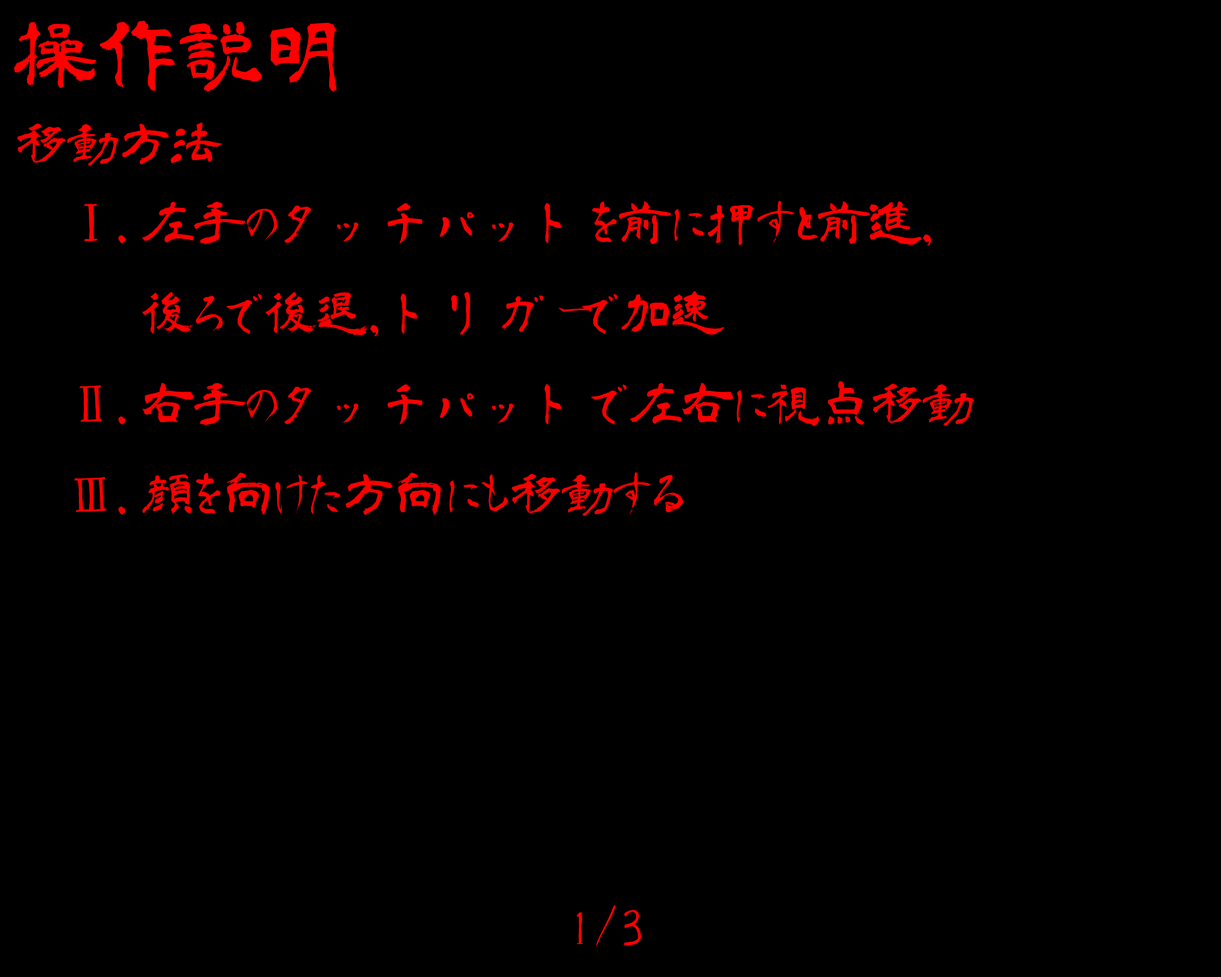
<style>
.page{position:relative;width:1221px;height:977px;background:#000000}
.page>*{position:absolute;margin:0}
.t1{font:82.7px "aoyagireisyosimo2";color:#ff0000}
.t2{font:51.7px "aoyagireisyosimo2";color:#fa0000}
.t3{font:51.7px "aoyagireisyosimo2";color:#ff0000}
</style>
<div class="page">
<p class="t1" style="left:14px;top:21px;width:323px;height:71px">操作説明</p>
<p class="t2" style="left:17px;top:122px;width:205px;height:44px">移動方法</p>
<p class="t2" style="left:74px;top:201px;width:900px;height:315px">Ⅰ.左手のタッチパットを前に押すと前進,<br>   後ろで後退,トリガーで加速<br>Ⅱ.右手のタッチパットで左右に視点移動<br>Ⅲ.顔を向けた方向にも移動する</p>
<p class="t3" style="left:577px;top:905px;width:64px;height:40px">1/3</p>
</div>
